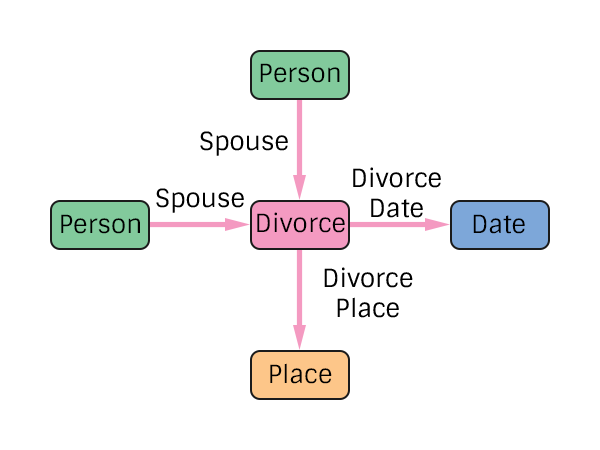
<style>
.page{position:relative;width:600px;height:450px;background:#ffffff}
.page>*{position:absolute;margin:0}
.t1{font:25px "Sintony";color:#000000}
</style>
<div class="page">
<p class="t1" style="left:260px;top:63px;width:80px;height:20px">Person</p>
<p class="t1" style="left:200px;top:131px;width:88px;height:25px">Spouse</p>
<p class="t1" style="left:353px;top:167px;width:88px;height:51px;text-align:center">Divorce<br>Date</p>
<p class="t1" style="left:156px;top:188px;width:88px;height:25px">Spouse</p>
<p class="t1" style="left:61px;top:214px;width:79px;height:20px">Person</p>
<p class="t1" style="left:257px;top:212px;width:88px;height:21px">Divorce</p>
<p class="t1" style="left:473px;top:214px;width:52px;height:20px">Date</p>
<p class="t1" style="left:324px;top:267px;width:89px;height:51px;text-align:center">Divorce<br>Place</p>
<p class="t1" style="left:270px;top:363px;width:62px;height:21px">Place</p>
</div>
